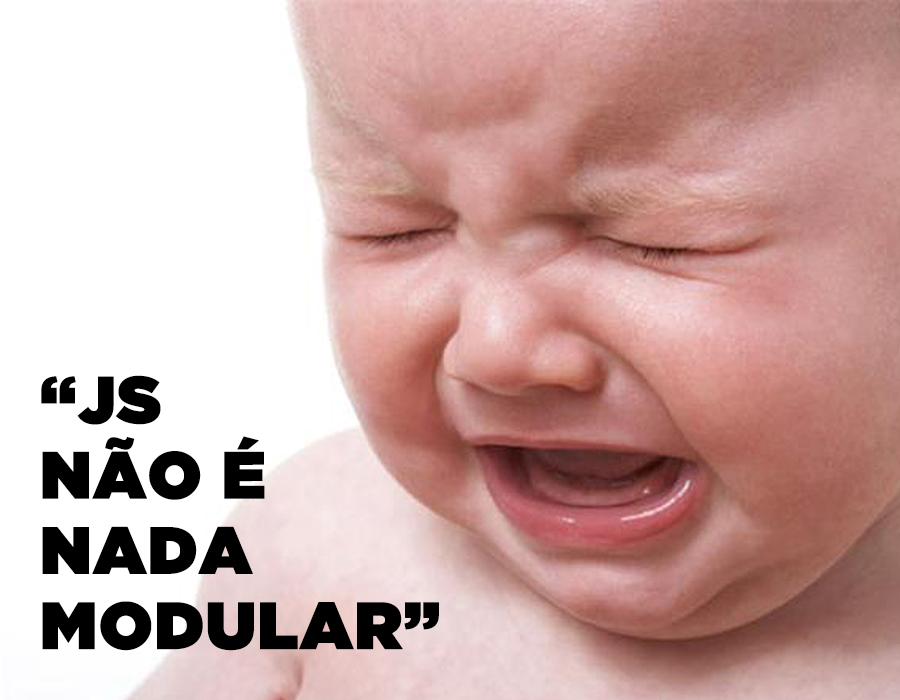
<style>
.page{position:relative;width:900px;height:700px;background:#ffffff}
.page>*{position:absolute;margin:0}
.t1{font:66.2px/75.2px "GothamUltra";color:#000000;font-weight:bold}
</style>
<div class="page">
<p class="t1" style="left:41px;top:375px;width:398px;height:276px">“JS<br>NÃO É<br>NADA<br>MODULAR”</p>
</div>
